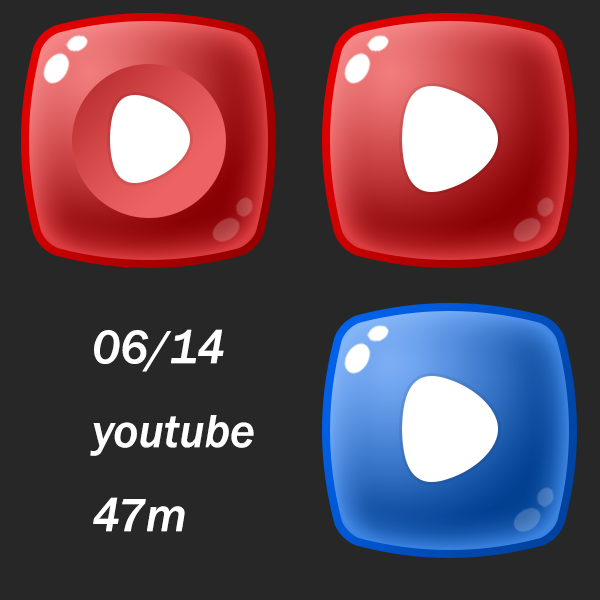
<style>
.page{position:relative;width:600px;height:600px;background:#272727}
.page>*{position:absolute;margin:0}
.t1{font:48px "FranklinGothic-MediumItalic";color:#ffffff}
</style>
<div class="page">
<p class="t1" style="left:90px;top:329px;width:164px;height:203px">06/14<br>youtube<br>47m</p>
</div>
